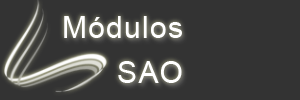
<style>
.page{position:relative;width:300px;height:100px;background:#333333}
.page>*{position:absolute;margin:0}
.t1{font:29.6px "ArialMT";letter-spacing:0.05em;color:#ffffff}
</style>
<div class="page">
<p class="t1" style="left:64px;top:16px;width:118px;height:22px">Módulos</p>
<p class="t1" style="left:118px;top:61px;width:64px;height:22px">SAO</p>
</div>
